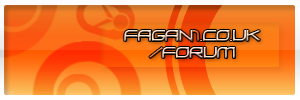
<style>
.page{position:relative;width:300px;height:100px}
.page>*{position:absolute;margin:0}
.t1{font:14px "ZeroHour"}
</style>
<div class="page">
<p class="t1" style="left:124px;top:29px;width:136px;height:13px">fagan1.co.uk</p>
<p class="t1" style="left:149px;top:47px;width:86px;height:11px">/forum</p>
</div>
